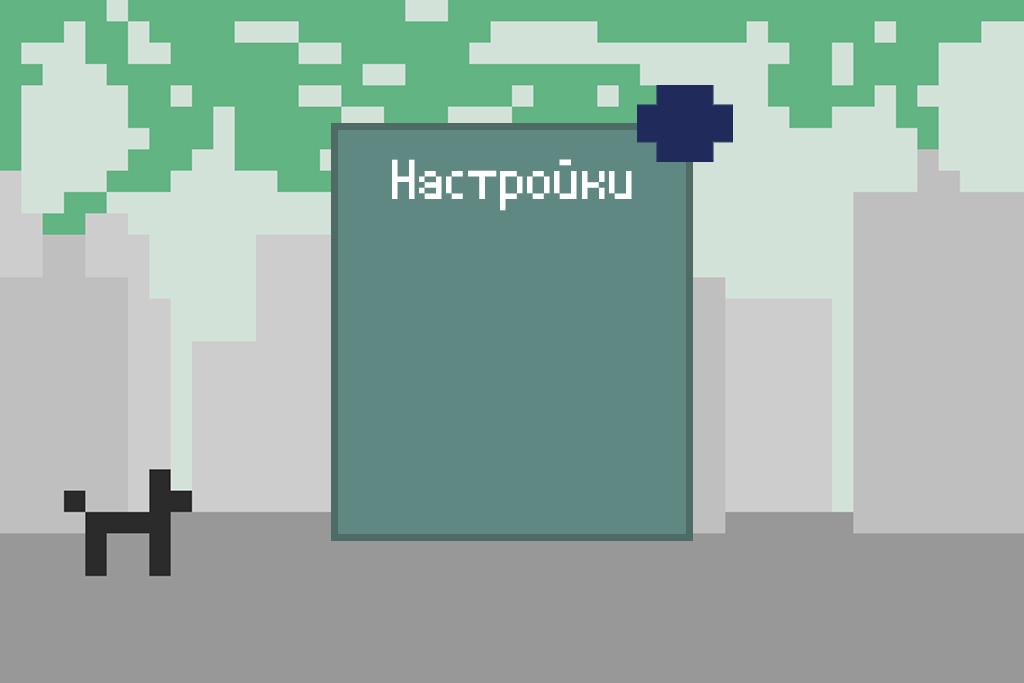
<style>
.page{position:relative;width:1024px;height:683px;background:#989898}
.page>*{position:absolute;margin:0}
.t1{font:90px "Thintel";color:#ffffff}
</style>
<div class="page">
<p class="t1" style="left:392px;top:159px;width:240px;height:52px">Настройки</p>
</div>
